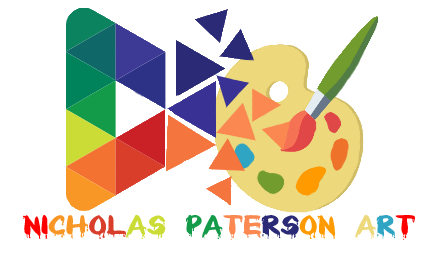
<style>
.page{position:relative;width:431px;height:277px;background:#ffffff}
.page>*{position:absolute;margin:0}
.t1{font:24px "Paintdrips";color:#ff0000}
.t2{font:24px "Paintdrips";color:#f89725}
.t3{font:24px "Paintdrips";color:#d93e2a}
.t4{font:24px "Paintdrips";color:#ccdc36}
.t5{font:24px "Paintdrips";color:#149b49}
.t6{font:24px "Paintdrips";color:#fa8850}
.t7{font:24px "Paintdrips";color:#2b2a77}
.t8{font:24px "Paintdrips";color:#ff9a00}
.t9{font:24px "Paintdrips";color:#edd87c}
.t10{font:24px "Paintdrips";color:#2fa5c3}
</style>
<div class="page">
<p class="t1" style="left:23px;top:214px;width:392px;height:26px">NI<span class="t2">CH</span><span class="t3">OL</span><span class="t4">AS </span><span class="t5">PA</span><span class="t6">TE</span><span class="t7">RS</span><span class="t8">ON </span><span class="t9">A</span><span class="t10">R</span>T</p>
</div>
